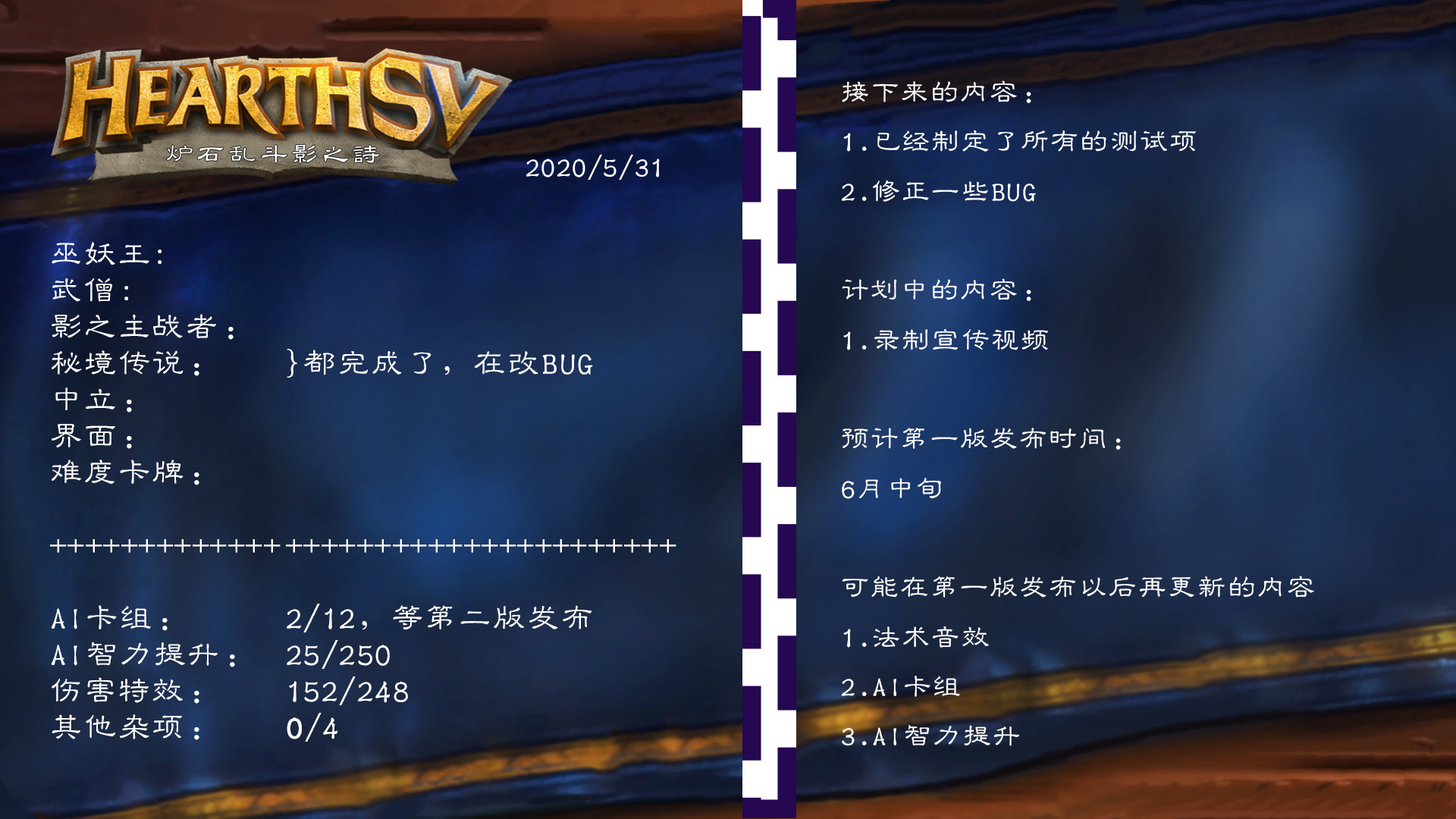
<style>
.page{position:relative;width:1456px;height:819px}
.page>*{position:absolute;margin:0}
.t1{font:28.3px "GBJenLei-Medium";letter-spacing:0.05em;color:#ffffff}
.t2{font:32.4px/36.4px "GBJenLei-Medium";letter-spacing:0.05em;color:#ffffff}
.t3{font:32.4px/36.4px "GBJenLei-Medium";letter-spacing:0.05em;color:#ffffff;font-weight:bold}
</style>
<div class="page">
<p class="t1" style="left:841px;top:80px;width:473px;height:666px">接下来的内容：<br>1.已经制定了所有的测试项<br>2.修正一些BUG<br><br>计划中的内容：<br>1.录制宣传视频<br><br>预计第一版发布时间：<br>6月中旬<br><br>可能在第一版发布以后再更新的内容<br>1.法术音效<br>2.AI卡组<br>3.AI智力提升</p>
<p class="t1" style="left:526px;top:154px;width:134px;height:26px">2020/5/31</p>
<p class="t2" style="left:50px;top:242px;width:231px;height:498px">巫妖王:<br>武僧:<br>影之主战者：<br>秘境传说：<br>中立：<br>界面：<br>难度卡牌：<br><br>+++++++++++++<br><br>AI卡组：<br>AI智力提升：<br>伤害特效：<br>其他杂项：</p>
<p class="t2" style="left:286px;top:349px;width:390px;height:393px">}都完成了，在改BUG<br><br><br><br><br>++++++++++++++++++++++<br><br>2/12，等第二版发布<br>25/250<br>152/248<br><span class="t3">0</span>/4</p>
</div>
